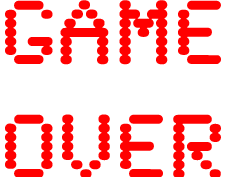
<style>
.page{position:relative;width:225px;height:177px;background:#ffffff}
.page>*{position:absolute;margin:0}
.t1{font:95px "SynchroLET";color:#ff0000}
</style>
<div class="page">
<p class="t1" style="left:5px;top:0px;width:216px;height:179px;text-align:center">Game<br>Over</p>
</div>
